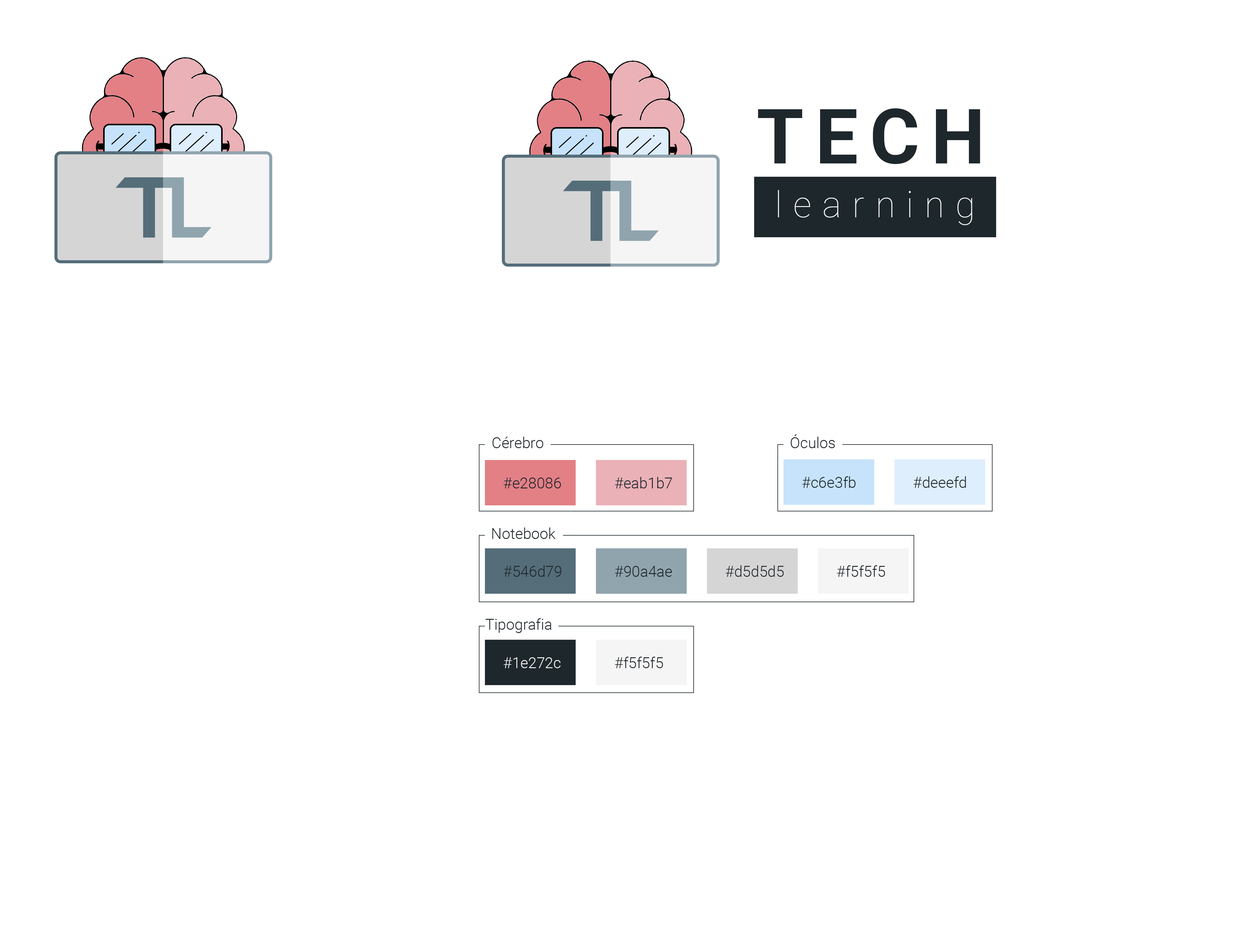
<style>
.page{position:relative;width:1256px;height:949px;background:#ffffff}
.page>*{position:absolute;margin:0}
.t1{font:76.4px "Roboto-Bold";letter-spacing:0.15em;color:#1e272c}
.t2{font:36.3px "Roboto-Thin";letter-spacing:0.3em;color:#f5f5f5}
.t3{font:15.1px "Roboto-Light";color:#1e272c}
.t4{font:15.1px "Roboto-Light";color:#f5f5f5}
</style>
<div class="page">
<p class="t1" style="left:758px;top:108px;width:222px;height:56px">TECH</p>
<p class="t2" style="left:778px;top:190px;width:195px;height:35px">learning</p>
<p class="t3" style="left:493px;top:437px;width:51px;height:11px">Cérebro</p>
<p class="t3" style="left:791px;top:434px;width:44px;height:14px">Óculos</p>
<p class="t3" style="left:504px;top:478px;width:57px;height:10px">#e28086</p>
<p class="t3" style="left:615px;top:477px;width:57px;height:11px">#eab1b7</p>
<p class="t3" style="left:803px;top:476px;width:53px;height:12px">#c6e3fb</p>
<p class="t3" style="left:914px;top:476px;width:52px;height:12px">#deeefd</p>
<p class="t3" style="left:492px;top:527px;width:64px;height:12px">Notebook</p>
<p class="t3" style="left:504px;top:565px;width:58px;height:12px">#546d79</p>
<p class="t3" style="left:615px;top:566px;width:57px;height:11px">#90a4ae</p>
<p class="t3" style="left:726px;top:565px;width:58px;height:12px">#d5d5d5</p>
<p class="t3" style="left:837px;top:565px;width:48px;height:12px">#f5f5f5</p>
<p class="t3" style="left:486px;top:618px;width:66px;height:15px">Tipografia</p>
<p class="t4" style="left:504px;top:657px;width:57px;height:11px">#1e272c</p>
<p class="t3" style="left:615px;top:657px;width:48px;height:11px">#f5f5f5</p>
</div>
